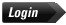
<style>
.page{position:relative;width:66px;height:25px;background:#ffffff}
.page>*{position:absolute;margin:0}
.t1{font:13.3px "Univers-CondensedBoldOblique";color:#ffffff}
</style>
<div class="page">
<p class="t1" style="left:8px;top:7px;width:30px;height:13px">Login</p>
</div>
